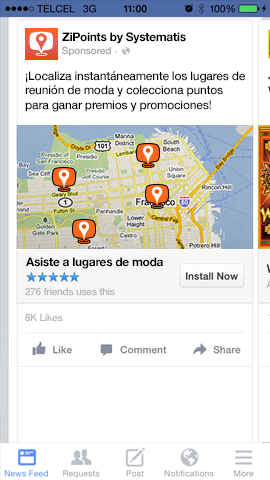
<style>
.page{position:relative;width:270px;height:480px;background:#ffffff}
.page>*{position:absolute;margin:0}
.t1{font:12px "HelveticaNeue-Bold";letter-spacing:-0.025em;color:#000000}
.t2{font:12px "HelveticaNeue-Medium";letter-spacing:-0.025em;color:#000000}
.t3{font:10px "HelveticaNeue-Medium";letter-spacing:-0.025em;color:#b5b7b4}
</style>
<div class="page">
<p class="t1" style="left:62px;top:32px;width:124px;height:12px">ZiPoints by Systematis</p>
<p class="t2" style="left:25px;top:71px;width:220px;height:41px">¡Localiza instantáneamente los lugares de<br>reunión de moda y colecciona puntos<br>para ganar premios y promociones!</p>
<p class="t1" style="left:26px;top:257px;width:137px;height:12px">Asiste a lugares de moda</p>
<p class="t3" style="left:25px;top:287px;width:90px;height:9px">276 friends uses this</p>
<p class="t3" style="left:25px;top:313px;width:38px;height:9px">8K Likes</p>
</div>
